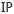
<style>
.page{position:relative;width:14px;height:14px;background:#ffffff}
.page>*{position:absolute;margin:0}
.t1{font:13.8px "Tahoma";color:#333333;scale:0.89 1}
</style>
<div class="page">
<p class="t1" style="left:1px;top:2px;width:12px;height:10px">IP</p>
</div>
